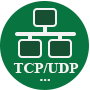
<style>
.page{position:relative;width:90px;height:90px;background:#087540}
.page>*{position:absolute;margin:0}
.t1{font:15px "TimesNewRomanPS-BoldMT";color:#f2f2f2}
</style>
<div class="page">
<p class="t1" style="left:13px;top:63px;width:66px;height:10px">TCP/UDP</p>
<p class="t1" style="left:40px;top:79px;width:10px;height:2px">...</p>
</div>
